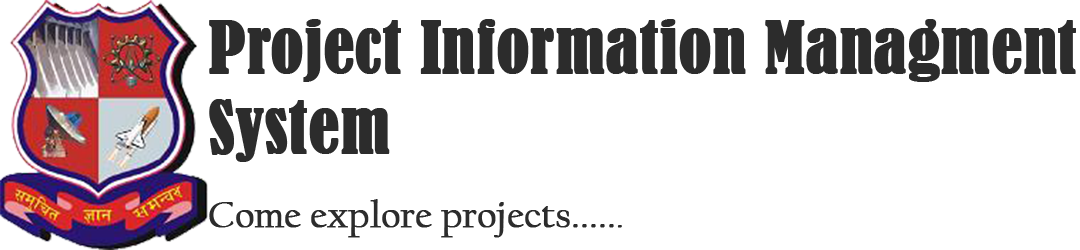
<style>
.page{position:relative;width:1080px;height:250px;background:#ffffff}
.page>*{position:absolute;margin:0}
.t1{font:66.7px "BernardMT-Condensed";color:#2c2c2c;font-weight:bold}
.t2{font:37.5px "CalifornianFB-Reg";color:#2c2c2c;font-weight:bold}
.t3{font:33.3px "CalifornianFB-Reg";color:#2c2c2c;font-weight:bold}
</style>
<div class="page">
<p class="t1" style="left:209px;top:19px;width:867px;height:143px">Project Information Managment <br>System</p>
<p class="t2" style="left:209px;top:199px;width:413px;height:39px">Come explore projects.....<span class="t3">.</span></p>
</div>
